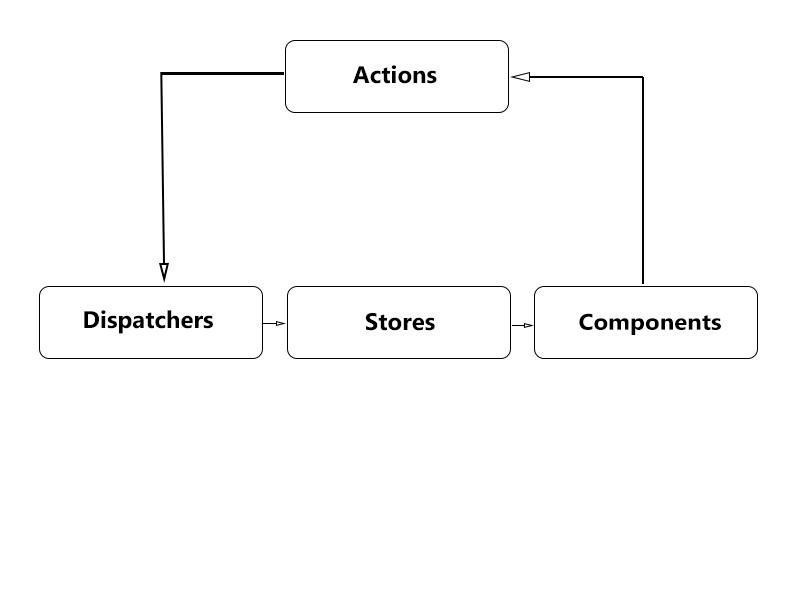
<style>
.page{position:relative;width:792px;height:612px;background:#ffffff}
.page>*{position:absolute;margin:0}
.t1{font:24px "MicrosoftPhagsPa-Bold";color:#000000}
.t2{font:22.5px "MicrosoftPhagsPa-Bold";color:#000000;scale:1.07 1}
</style>
<div class="page">
<p class="t1" style="left:353px;top:65px;width:84px;height:19px">Actions</p>
<p class="t1" style="left:84px;top:310px;width:129px;height:24px">Dispatchers</p>
<p class="t1" style="left:365px;top:313px;width:70px;height:18px">Stores</p>
<p class="t2" style="left:579px;top:313px;width:142px;height:22px">Components</p>
</div>
